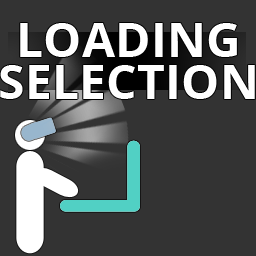
<style>
.page{position:relative;width:256px;height:256px;background:#333333}
.page>*{position:absolute;margin:0}
.t1{font:48.4px "OpenSans-Bold";color:#ffffff}
</style>
<div class="page">
<p class="t1" style="left:20px;top:23px;width:217px;height:34px">LOADING</p>
<p class="t1" style="left:0px;top:65px;width:255px;height:34px">SELECTION</p>
</div>
